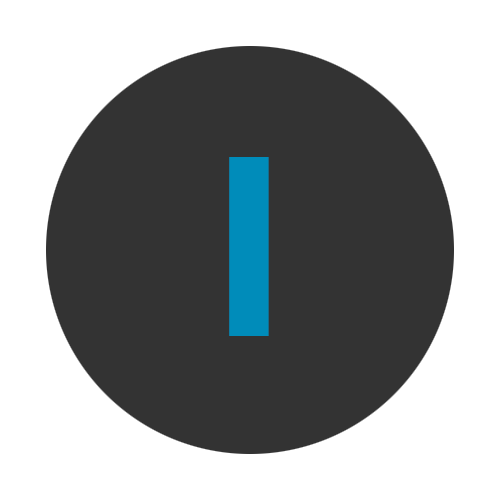
<style>
.page{position:relative;width:500px;height:500px;background:#333333}
.page>*{position:absolute;margin:0}
.t1{font:250px "HelveticaNeue-Bold";color:#008cba}
</style>
<div class="page">
<p class="t1" style="left:229px;top:157px;width:40px;height:179px">I</p>
</div>
